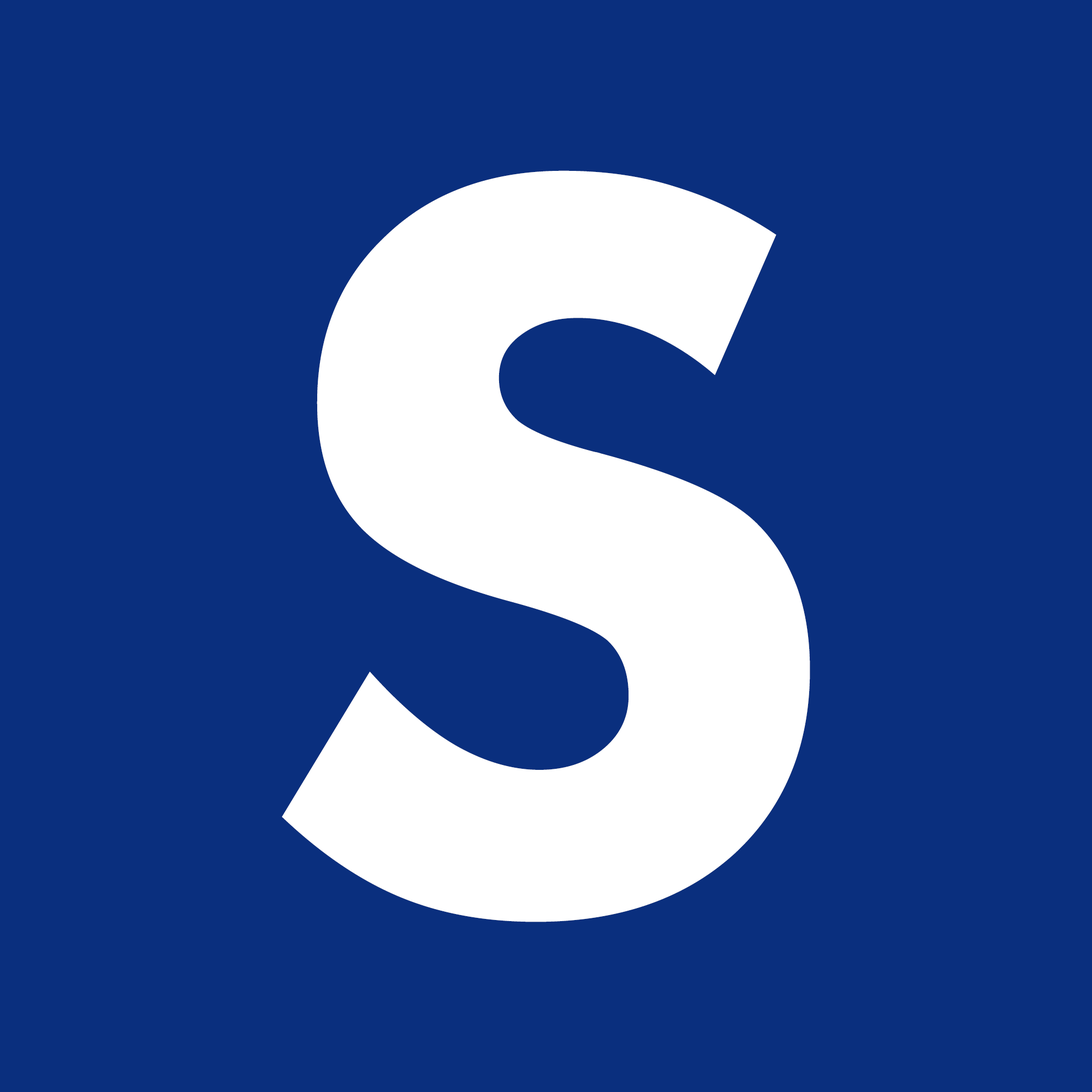
<style>
.page{position:relative;width:1092px;height:1092px;background:#0a2f7e}
.page>*{position:absolute;margin:0}
.t1{font:999.9px "Futura-Bold";color:#ffffff}
</style>
<div class="page">
<p class="t1" style="left:282px;top:170px;width:528px;height:752px">S</p>
</div>
